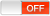
<style>
.page{position:relative;width:50px;height:16px}
.page>*{position:absolute;margin:0}
.t1{font:9px "ArialMT";color:#ffffff}
</style>
<div class="page">
<p class="t1" style="left:26px;top:4px;width:19px;height:8px">OFF</p>
</div>
